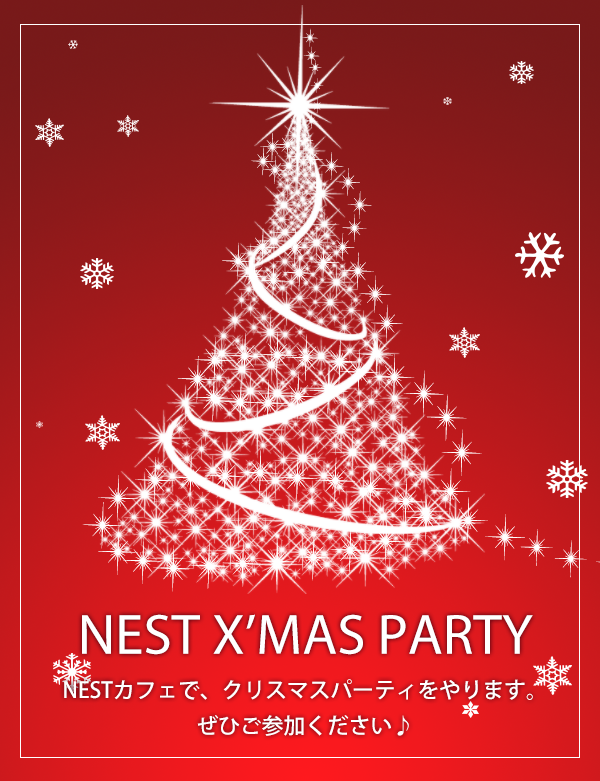
<style>
.page{position:relative;width:600px;height:781px}
.page>*{position:absolute;margin:0}
.t1{font:21.7px/44px "KozGoPr6N-Medium";color:#ffffff;text-transform:uppercase}
.t2{font:57.1px/40.8px "MyriadPro-Regular";color:#ffffff;text-transform:uppercase}
.t3{font:21.7px/35.8px "KozGoPr6N-Medium";color:#ffffff;text-transform:uppercase}
</style>
<div class="page">
<p class="t1" style="left:64px;top:614px;width:469px;height:122px;text-align:center"><span class="t2">nest x’mas party<br></span>NESTカフェで、クリスマスパーティをやります。<br><span class="t3">ぜひご参加ください♪</span></p>
</div>
